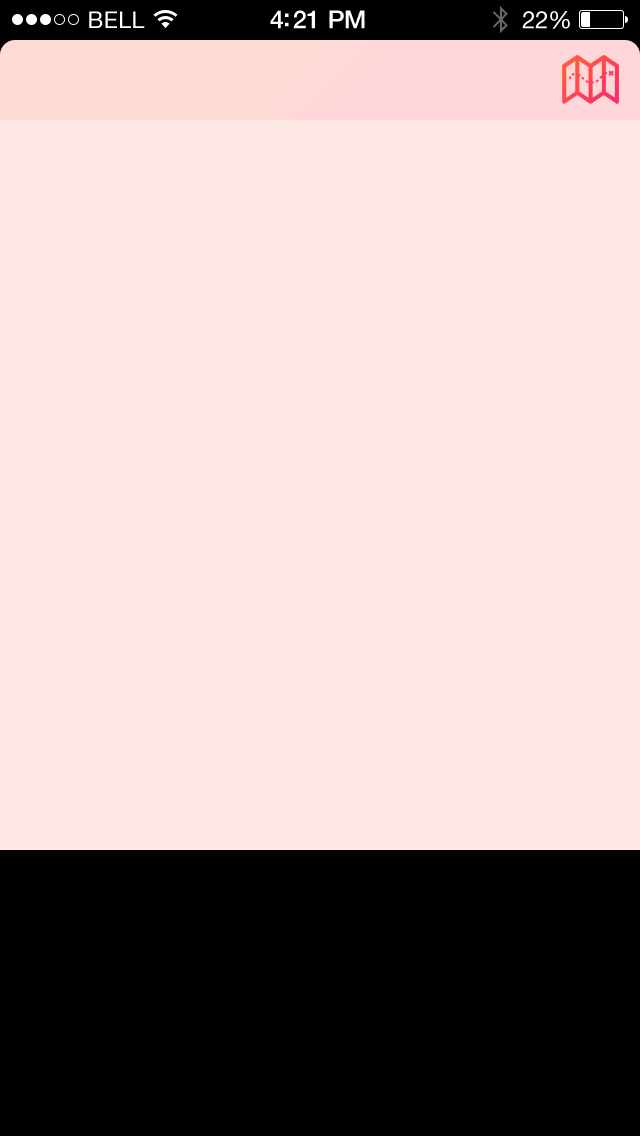
<style>
.page{position:relative;width:640px;height:1136px;background:#ffe9e6}
.page>*{position:absolute;margin:0}
.t1{font:23px "HelveticaNeue";letter-spacing:0.02em;color:#ffffff}
.t2{font:25px "HelveticaNeue-Medium";letter-spacing:-0.02em;color:#ffffff}
.t3{font:24px "HelveticaNeue";letter-spacing:-0.02em;color:#ffffff}
</style>
<div class="page">
<p class="t1" style="left:89px;top:11px;width:56px;height:17px">BELL</p>
<p class="t2" style="left:270px;top:10px;width:95px;height:19px">4:21 PM</p>
<p class="t3" style="left:522px;top:11px;width:48px;height:18px">22%</p>
</div>
